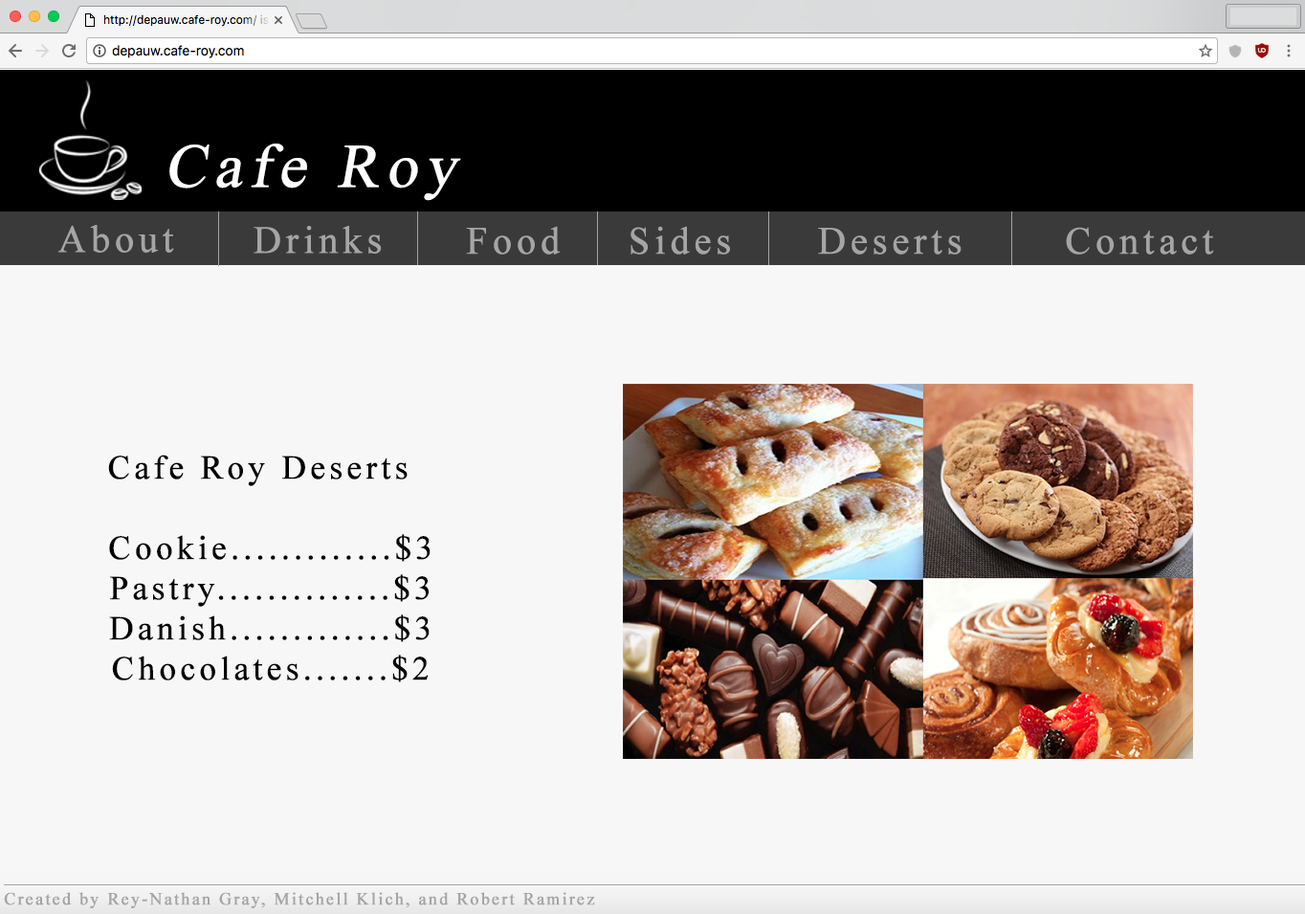
<style>
.page{position:relative;width:1305px;height:914px;background:#f7f7f7}
.page>*{position:absolute;margin:0}
.t1{font:61.7px "TimesNewRomanPSMT";letter-spacing:0.1em;color:#ffffff;font-weight:bold;font-style:italic}
.t2{font:33.5px "TimesNewRomanPSMT";letter-spacing:0.1em;color:#000000;font-weight:bold}
.t3{font:17.2px "TimesNewRomanPSMT";letter-spacing:0.1em;color:#a5a5a5;font-weight:bold}
</style>
<div class="page">
<p class="t1" style="left:169px;top:144px;width:292px;height:57px">Cafe Roy</p>
<p class="t2" style="left:108px;top:454px;width:323px;height:228px;text-align:center">Cafe Roy Deserts  <br><br>Cookie.............$3<br>Pastry..............$3<br>Danish.............$3<br>Chocolates.......$2</p>
<p class="t3" style="left:4px;top:892px;width:591px;height:16px">Created by Rey-Nathan Gray, Mitchell Klich, and Robert Ramirez</p>
</div>
